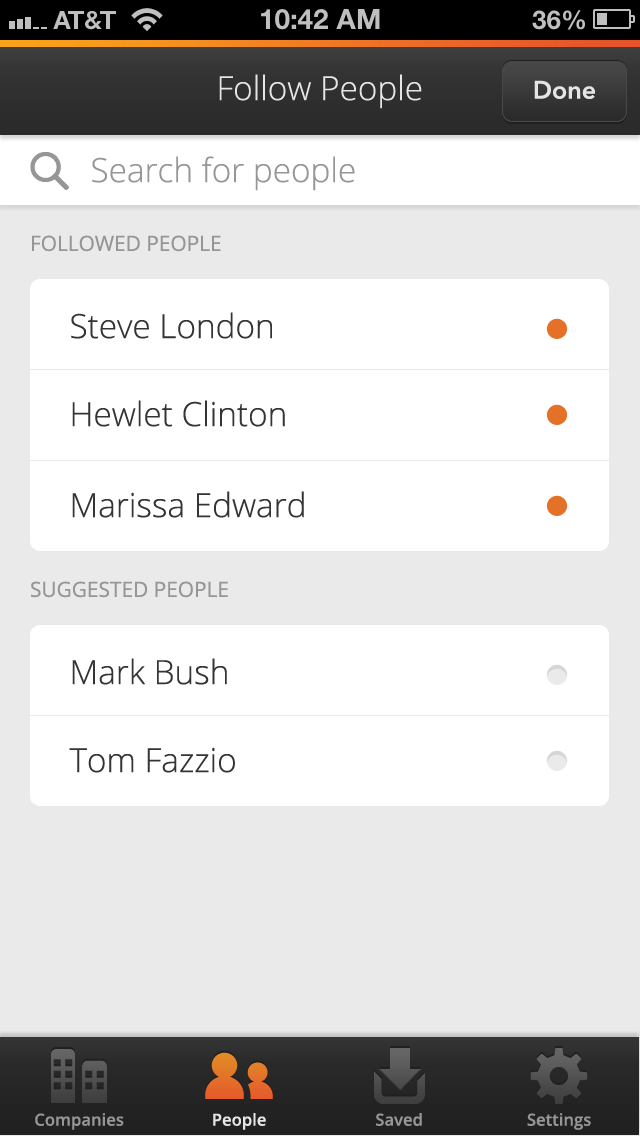
<style>
.page{position:relative;width:640px;height:1136px;background:#ffffff}
.page>*{position:absolute;margin:0}
.t1{font:33.3px "OpenSans-Light";color:#e5e5e5}
.t2{font:25px "AvenirNext-DemiBold";color:#e5e5e5}
.t3{font:33.3px "OpenSans-Light";color:#969696}
.t4{font:20.8px "OpenSans";color:#969696}
.t5{font:33.3px "OpenSans-Light";color:#343434}
.t6{font:16.7px "OpenSans-Semibold";color:#969696}
.t7{font:16.7px "OpenSans-Semibold";color:#e5e5e5}
</style>
<div class="page">
<p class="t1" style="left:219px;top:74px;width:203px;height:35px">Follow People</p>
<p class="t2" style="left:534px;top:80px;width:61px;height:19px">Done</p>
<p class="t3" style="left:92px;top:156px;width:263px;height:35px">Search for people</p>
<p class="t4" style="left:32px;top:235px;width:189px;height:17px">FOLLOWED PEOPLE</p>
<p class="t5" style="left:71px;top:312px;width:201px;height:27px">Steve London</p>
<p class="t5" style="left:72px;top:400px;width:213px;height:27px">Hewlet Clinton</p>
<p class="t5" style="left:72px;top:491px;width:232px;height:27px">Marissa Edward</p>
<p class="t4" style="left:31px;top:581px;width:197px;height:17px">SUGGESTED PEOPLE</p>
<p class="t5" style="left:72px;top:658px;width:155px;height:27px">Mark Bush</p>
<p class="t5" style="left:69px;top:747px;width:166px;height:26px">Tom Fazzio</p>
<p class="t6" style="left:35px;top:1113px;width:89px;height:17px">Companies</p>
<p class="t7" style="left:213px;top:1113px;width:53px;height:17px">People</p>
<p class="t6" style="left:376px;top:1113px;width:46px;height:13px">Saved</p>
<p class="t6" style="left:527px;top:1113px;width:64px;height:17px">Settings</p>
</div>
